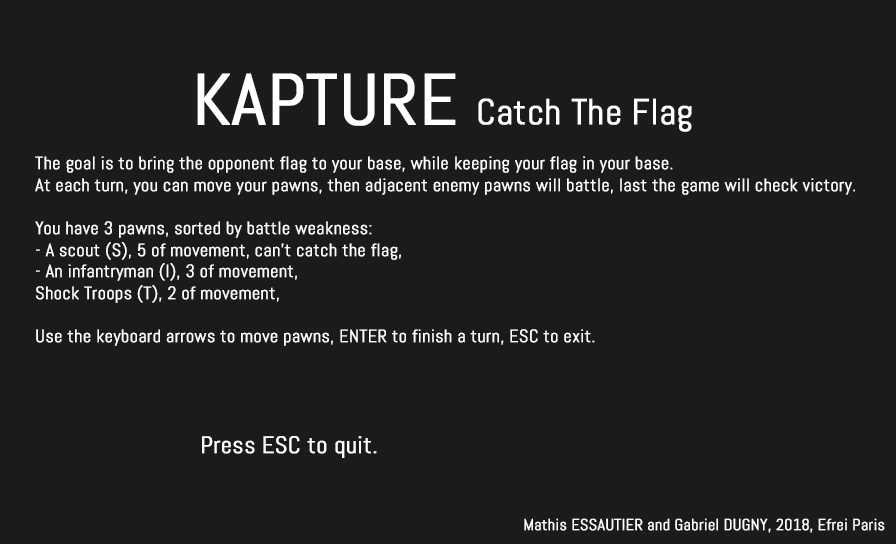
<style>
.page{position:relative;width:896px;height:544px;background:#1b1b1b}
.page>*{position:absolute;margin:0}
.t1{font:36px "Abel-Regular";color:#ffffff;font-weight:bold}
.t2{font:72px "Abel-Regular";color:#ffffff;font-weight:bold}
.t3{font:18px "Abel-Regular";color:#ffffff;font-weight:bold}
.t4{font:24px "Abel-Regular";color:#ffffff;font-weight:bold}
.t5{font:16px "Abel-Regular";color:#ffffff;font-weight:bold}
</style>
<div class="page">
<p class="t1" style="left:197px;top:73px;width:495px;height:59px"><span class="t2">KAPTURE </span>Catch The Flag</p>
<p class="t3" style="left:35px;top:156px;width:820px;height:190px">The goal is to bring the opponent flag to your base, while keeping your flag in your base.<br>At each turn, you can move your pawns, then adjacent enemy pawns will battle, last the game will check victory.<br><br>You have 3 pawns, sorted by battle weakness:<br>- A scout (S), 5 of movement, can’t catch the flag,<br>- An infantryman (I), 3 of movement,<br>Shock Troops (T), 2 of movement,<br><br>Use the keyboard arrows to move pawns, ENTER to finish a turn, ESC to exit.</p>
<p class="t4" style="left:202px;top:436px;width:175px;height:22px">Press ESC to quit.</p>
<p class="t5" style="left:524px;top:518px;width:361px;height:15px">Mathis ESSAUTIER and Gabriel DUGNY, 2018, Efrei Paris</p>
</div>
